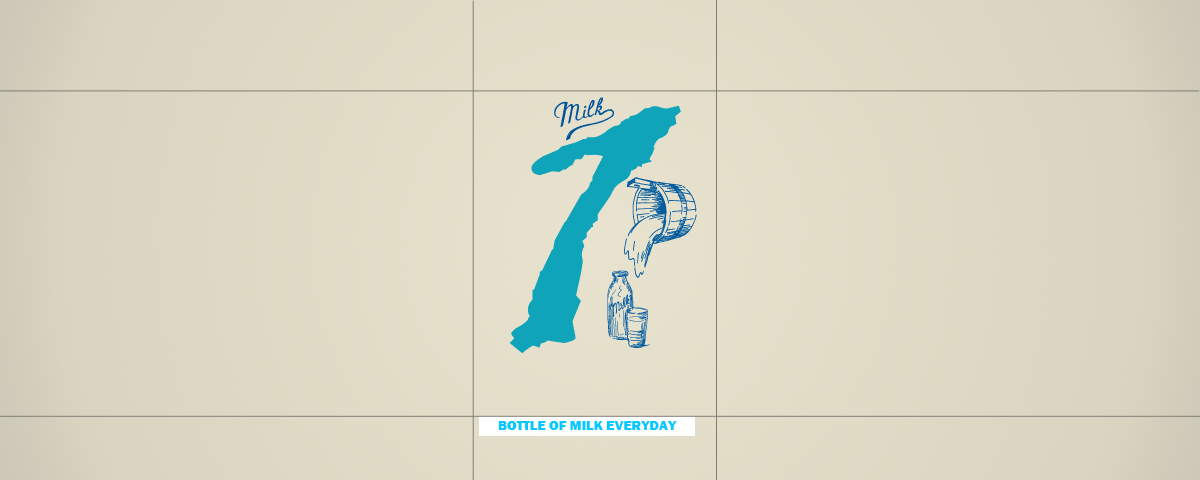
<style>
.page{position:relative;width:1200px;height:480px}
.page>*{position:absolute;margin:0}
.t1{font:14px "FranklinGothic-Heavy";color:#04c8ff}
</style>
<div class="page">
<p class="t1" style="left:498px;top:421px;width:179px;height:9px">BOTTLE OF MILK EVERYDAY</p>
</div>
